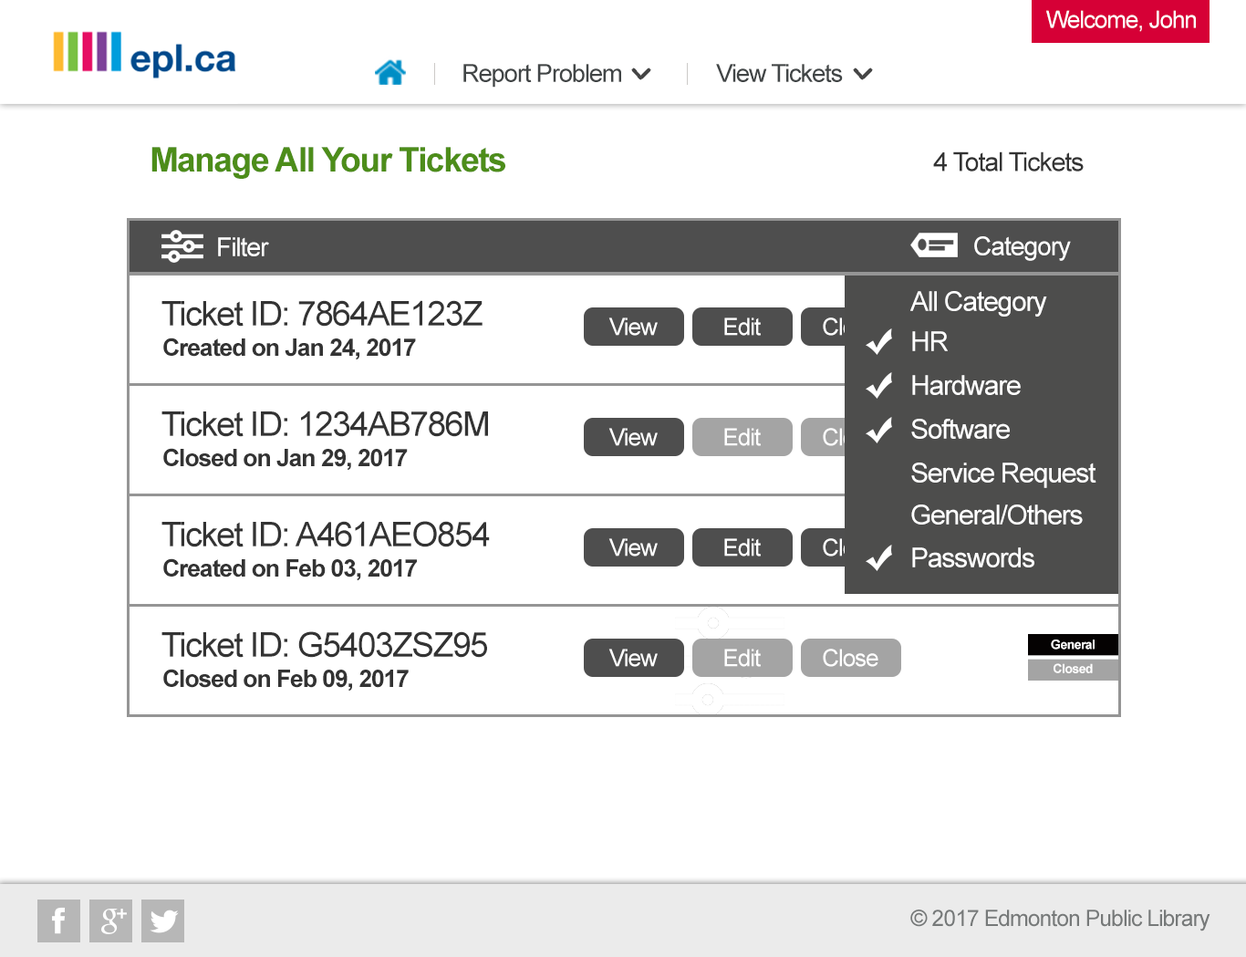
<style>
.page{position:relative;width:1246px;height:957px;background:#ffffff}
.page>*{position:absolute;margin:0}
.t1{font:23.7px "ArialMT";letter-spacing:-0.04em;color:#ffffff}
.t2{font:24.9px "ArialMT";letter-spacing:-0.04em;color:#414546}
.t3{font:33.9px "Arial-BoldMT";letter-spacing:-0.04em;color:#4d8d1a}
.t4{font:26.2px "ArialMT";letter-spacing:-0.04em;color:#333333}
.t5{font:25.9px "ArialMT";letter-spacing:-0.04em;color:#ffffff}
.t6{font:27.4px "ArialMT";letter-spacing:-0.04em;color:#ffffff}
.t7{font:33.9px "ArialMT";letter-spacing:-0.04em;color:#333333}
.t8{font:23.7px "ArialMT";letter-spacing:-0.04em}
.t9{font:24.2px "Arial-BoldMT";letter-spacing:-0.04em;color:#333333}
.t10{font:12.8px "Arial-BoldMT";letter-spacing:-0.04em;color:#ffffff}
.t11{font:22.6px "ArialMT";letter-spacing:-0.04em;color:#767979}
</style>
<div class="page">
<p class="t1" style="left:1046px;top:10px;width:150px;height:22px">Welcome, John</p>
<p class="t2" style="left:463px;top:64px;width:158px;height:24px">Report Problem</p>
<p class="t2" style="left:716px;top:64px;width:127px;height:18px">View Tickets</p>
<p class="t3" style="left:151px;top:147px;width:354px;height:32px">Manage All Your Tickets</p>
<p class="t4" style="left:933px;top:151px;width:151px;height:20px">4 Total Tickets</p>
<p class="t5" style="left:218px;top:237px;width:51px;height:19px">Filter</p>
<p class="t5" style="left:974px;top:236px;width:97px;height:25px">Category</p>
<p class="t6" style="left:910px;top:291px;width:137px;height:26px">All Category</p>
<p class="t7" style="left:161px;top:300px;width:322px;height:27px">Ticket ID: 7864AE123Z</p>
<p class="t1" style="left:608px;top:317px;width:50px;height:19px">View</p>
<p class="t1" style="left:724px;top:317px;width:37px;height:19px">Edit</p>
<p class="t8" style="left:823px;top:317px;width:55px;height:19px">Close</p>
<p class="t9" style="left:163px;top:338px;width:253px;height:22px">Created on Jan 24, 2017</p>
<p class="t6" style="left:912px;top:331px;width:36px;height:20px">HR</p>
<p class="t6" style="left:912px;top:375px;width:109px;height:20px">Hardware</p>
<p class="t7" style="left:161px;top:411px;width:327px;height:26px">Ticket ID: 1234AB786M</p>
<p class="t6" style="left:911px;top:419px;width:99px;height:20px">Software</p>
<p class="t1" style="left:608px;top:428px;width:50px;height:18px">View</p>
<p class="t1" style="left:724px;top:428px;width:37px;height:18px">Edit</p>
<p class="t9" style="left:163px;top:448px;width:245px;height:23px">Closed on Jan 29, 2017</p>
<p class="t6" style="left:911px;top:463px;width:185px;height:25px">Service Request</p>
<p class="t6" style="left:911px;top:504px;width:172px;height:21px">General/Others</p>
<p class="t7" style="left:161px;top:521px;width:329px;height:26px">Ticket ID: A461AEO854</p>
<p class="t1" style="left:608px;top:538px;width:50px;height:18px">View</p>
<p class="t1" style="left:724px;top:538px;width:37px;height:18px">Edit</p>
<p class="t8" style="left:823px;top:538px;width:55px;height:18px">Close</p>
<p class="t6" style="left:912px;top:547px;width:122px;height:20px">Passwords</p>
<p class="t9" style="left:163px;top:558px;width:254px;height:23px">Created on Feb 03, 2017</p>
<p class="t7" style="left:161px;top:631px;width:326px;height:27px">Ticket ID: G5403ZSZ95</p>
<p class="t10" style="left:1051px;top:639px;width:44px;height:11px">General</p>
<p class="t1" style="left:608px;top:649px;width:50px;height:18px">View</p>
<p class="t1" style="left:724px;top:649px;width:37px;height:18px">Edit</p>
<p class="t1" style="left:823px;top:649px;width:55px;height:18px">Close</p>
<p class="t10" style="left:1054px;top:663px;width:39px;height:10px">Closed</p>
<p class="t9" style="left:163px;top:669px;width:246px;height:22px">Closed on Feb 09, 2017</p>
<p class="t11" style="left:910px;top:909px;width:301px;height:22px">© 2017 Edmonton Public Library</p>
</div>
